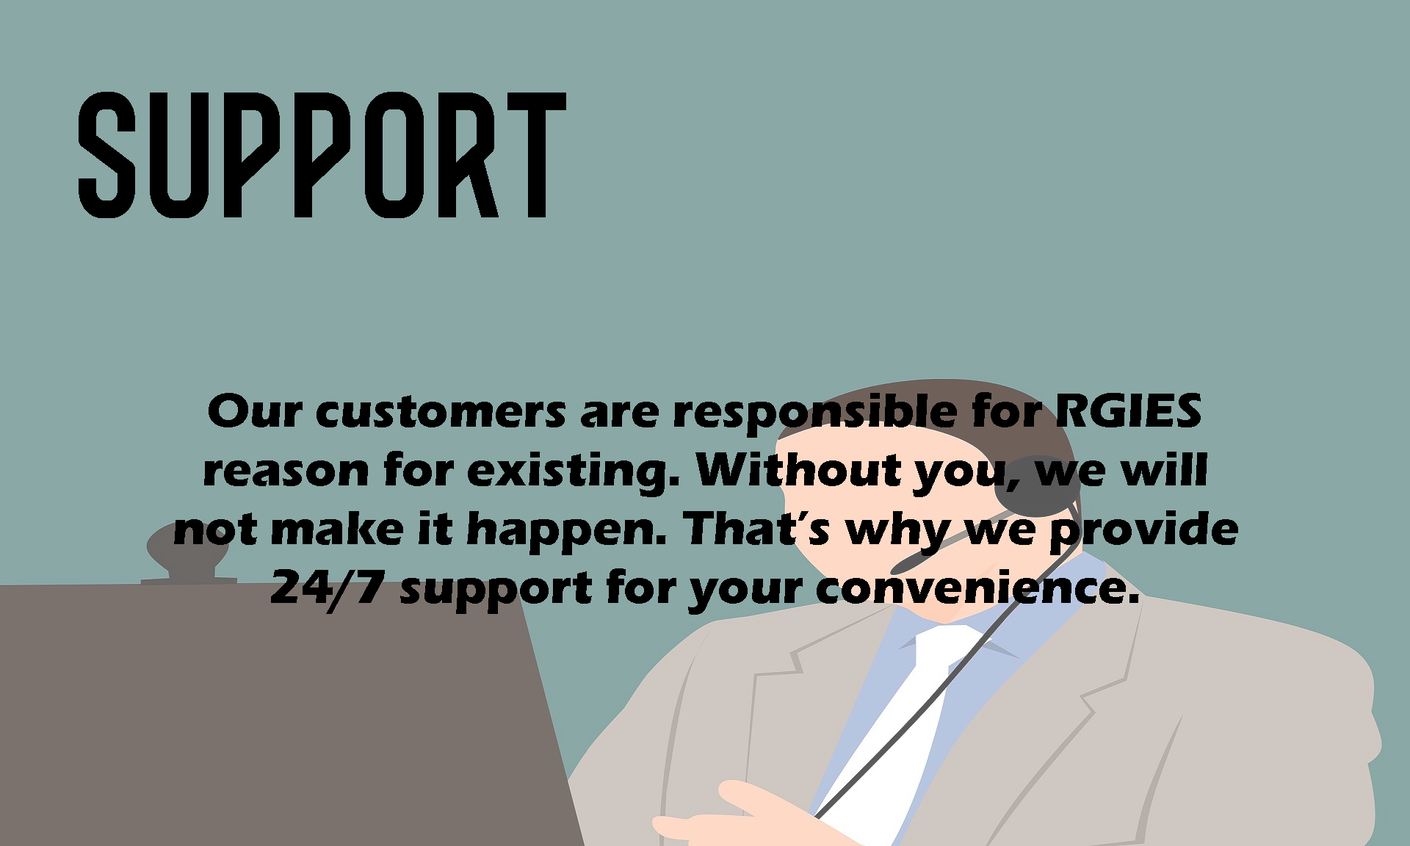
<style>
.page{position:relative;width:1410px;height:846px;background:#8aa8a6}
.page>*{position:absolute;margin:0}
.t1{font:146.8px "BROOKLINE-Condensed";color:#000000}
.t2{font:48.9px "ErasITC-Bold";color:#000000}
</style>
<div class="page">
<p class="t1" style="left:79px;top:92px;width:487px;height:126px">SUPPORT</p>
<p class="t2" style="left:174px;top:392px;width:1064px;height:223px;text-align:center">Our customers are responsible for RGIES reason for existing. Without you, we will not make it happen. That’s why we provide 24/7 support for your convenience.</p>
</div>
